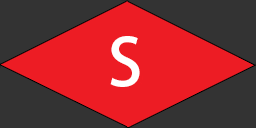
<style>
.page{position:relative;width:256px;height:128px;background:#333333}
.page>*{position:absolute;margin:0}
.t1{font:64px "AdobeHeitiStd-Regular";color:#ffffff}
</style>
<div class="page">
<p class="t1" style="left:110px;top:36px;width:30px;height:51px">S</p>
</div>
